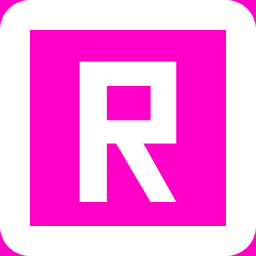
<style>
.page{position:relative;width:256px;height:256px;background:#ffffff}
.page>*{position:absolute;margin:0}
.t1{font:200px "SquareFont";color:#ffffff}
</style>
<div class="page">
<p class="t1" style="left:79px;top:61px;width:98px;height:141px">R</p>
</div>
